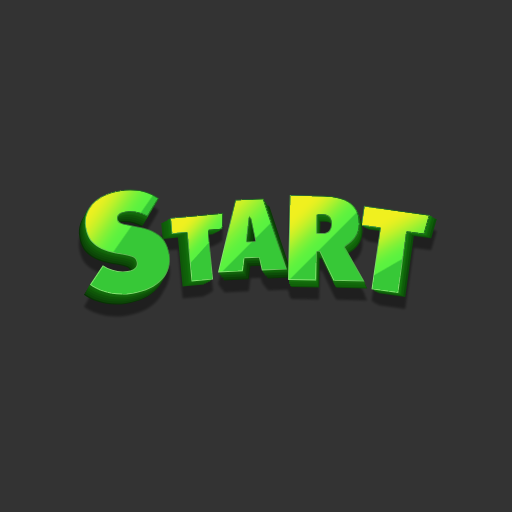
<style>
.page{position:relative;width:512px;height:512px;background:#333333}
.page>*{position:absolute;margin:0}
.t1{font:140.3px "FiraSans-Ultra"}
.t2{font:102.9px "FiraSans-Ultra"}
.t3{font:121.6px "FiraSans-Ultra"}
.t4{font:116.9px "FiraSans-Ultra"}
.t5{font:93.5px "FiraSans-Ultra"}
</style>
<div class="page">
<p class="t1" style="left:82px;top:187px;width:91px;height:110px;rotate:-9deg">S</p>
<p class="t2" style="left:217px;top:198px;width:70px;height:75px;rotate:-3deg">A</p>
<p class="t3" style="left:288px;top:195px;width:77px;height:87px;rotate:1deg">R</p>
<p class="t4" style="left:361px;top:205px;width:69px;height:88px;rotate:8deg">T</p>
<p class="t5" style="left:170px;top:212px;width:54px;height:70px;rotate:-5deg">T</p>
</div>
